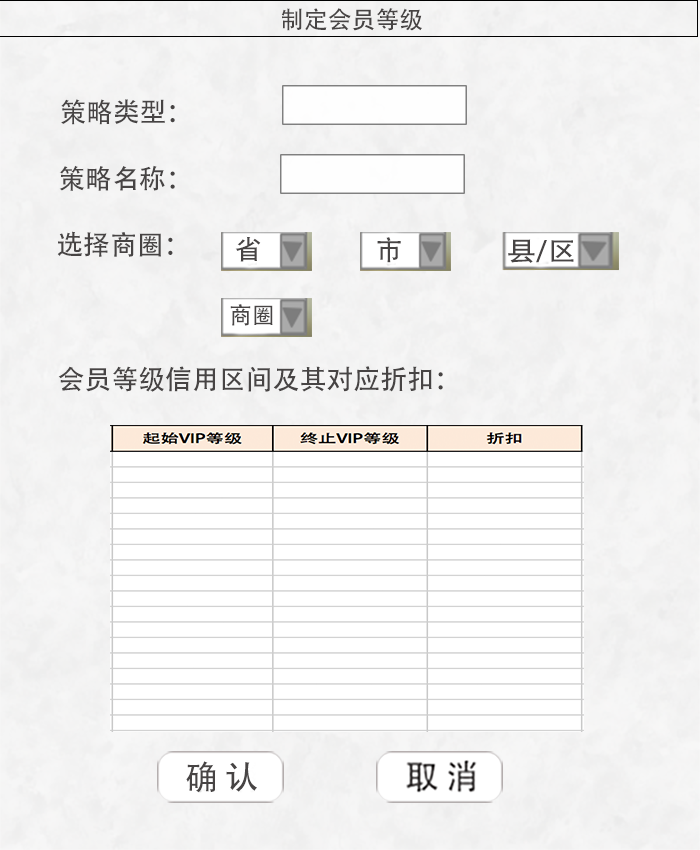
<style>
.page{position:relative;width:700px;height:850px;background:#ffffff}
.page>*{position:absolute;margin:0}
.t1{font:24px "AdobeHeitiStd-Regular";letter-spacing:-0.005em;color:#474444;text-transform:uppercase}
.t2{font:27px "AdobeHeitiStd-Regular";letter-spacing:-0.005em;color:#474444;text-transform:uppercase}
.t3{font:27px "AdobeHeitiStd-Regular";letter-spacing:-0.005em;color:#474444;text-transform:uppercase;scale:1.1 1}
.t4{font:23.2px "AdobeHeitiStd-Regular";letter-spacing:-0.005em;color:#474444;text-transform:uppercase}
</style>
<div class="page">
<p class="t1" style="left:281px;top:8px;width:141px;height:23px">制定会员等级</p>
<p class="t2" style="left:61px;top:99px;width:114px;height:26px">策略类型：</p>
<p class="t2" style="left:59px;top:165px;width:116px;height:26px">策略名称：</p>
<p class="t2" style="left:57px;top:231px;width:116px;height:26px">选择商圈：</p>
<p class="t2" style="left:235px;top:236px;width:26px;height:26px">省</p>
<p class="t2" style="left:377px;top:237px;width:24px;height:26px">市</p>
<p class="t3" style="left:508px;top:239px;width:66px;height:24px">县/区</p>
<p class="t4" style="left:230px;top:304px;width:43px;height:22px">商圈</p>
<p class="t2" style="left:58px;top:366px;width:385px;height:26px">会员等级信用区间及其对应折扣：</p>
</div>
